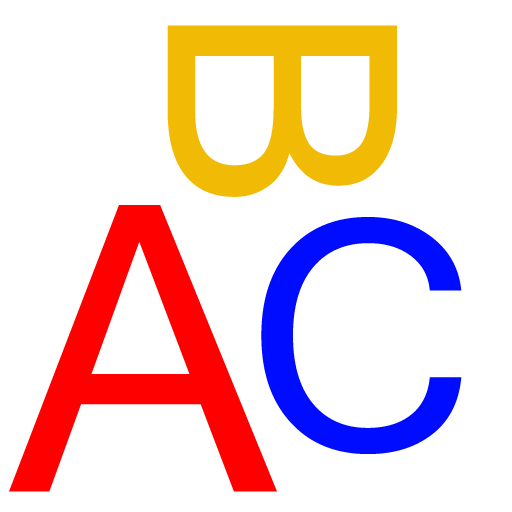
<style>
.page{position:relative;width:512px;height:512px;background:#ffffff}
.page>*{position:absolute;margin:0}
.t1{font:320px "MicrosoftSansSerif";letter-spacing:0.005em;color:#f1bc05}
.t2{font:400px "MicrosoftSansSerif";letter-spacing:0.005em;color:#ff0000}
.t3{font:320px "MicrosoftSansSerif";letter-spacing:0.005em;color:#000cff}
</style>
<div class="page">
<p class="t1" style="left:167px;top:25px;width:230px;height:172px;rotate:90deg">B</p>
<p class="t2" style="left:9px;top:205px;width:268px;height:287px">A</p>
<p class="t3" style="left:261px;top:217px;width:201px;height:237px">C</p>
</div>
